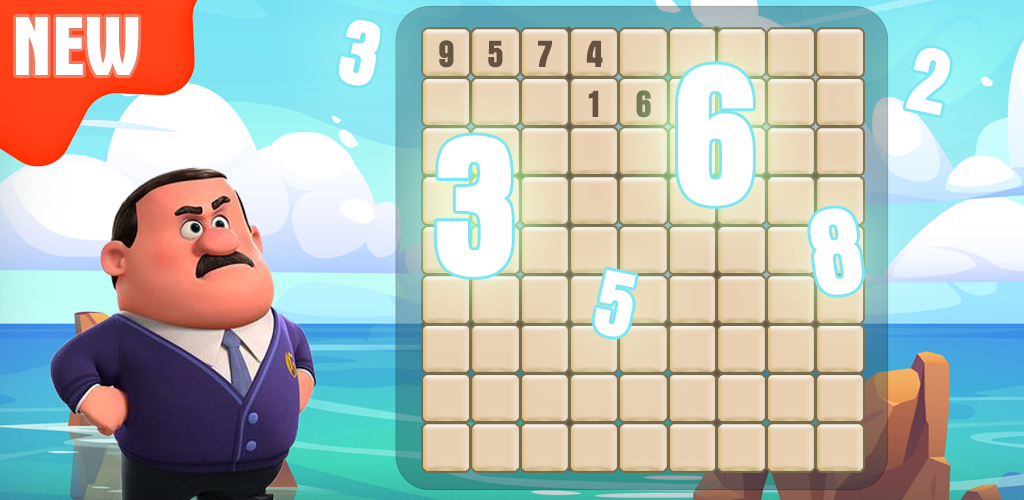
<style>
.page{position:relative;width:1024px;height:500px}
.page>*{position:absolute;margin:0}
.t1{font:85.1px "UTM-Aurora";color:#ffffff}
.t2{font:95.2px "UTM-Aurora";color:#ffffff}
.t3{font:205.6px "UTM-Aurora";color:#ffffff}
.t4{font:125.6px "UTM-Aurora";color:#ffffff}
</style>
<div class="page">
<p class="t1" style="left:16px;top:17px;width:123px;height:58px">NEW</p>
<p class="t2" style="left:339px;top:20px;width:41px;height:66px;rotate:12deg">3</p>
<p class="t2" style="left:905px;top:48px;width:45px;height:68px;rotate:12deg">2</p>
<p class="t3" style="left:678px;top:64px;width:75px;height:142px">6</p>
<p class="t3" style="left:436px;top:135px;width:76px;height:142px">3</p>
<p class="t4" style="left:810px;top:208px;width:52px;height:87px;rotate:-8deg">8</p>
<p class="t2" style="left:594px;top:269px;width:42px;height:68px;rotate:12deg">5</p>
</div>
